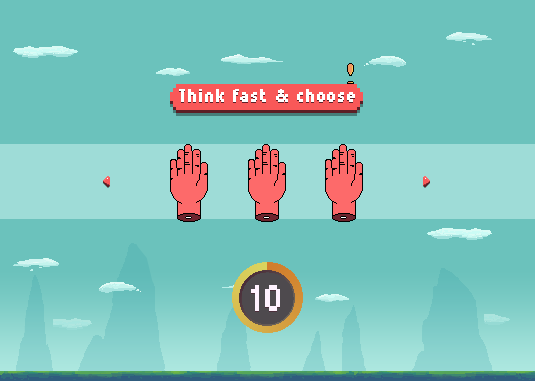
<style>
.page{position:relative;width:535px;height:381px;background:#6bc2bc}
.page>*{position:absolute;margin:0}
.t1{font:18px "Munro";letter-spacing:0.05em;color:#ffffff;font-weight:bold}
.t2{font:36px "Munro";letter-spacing:0.05em;color:#fff2ff;font-weight:bold}
</style>
<div class="page">
<p class="t1" style="left:179px;top:89px;width:176px;height:13px">Think fast &amp; choose</p>
<p class="t1" style="left:179px;top:90px;width:176px;height:13px">Think fast &amp; choose</p>
<p class="t2" style="left:251px;top:286px;width:29px;height:26px">10</p>
<p class="t2" style="left:251px;top:285px;width:29px;height:26px">10</p>
</div>
